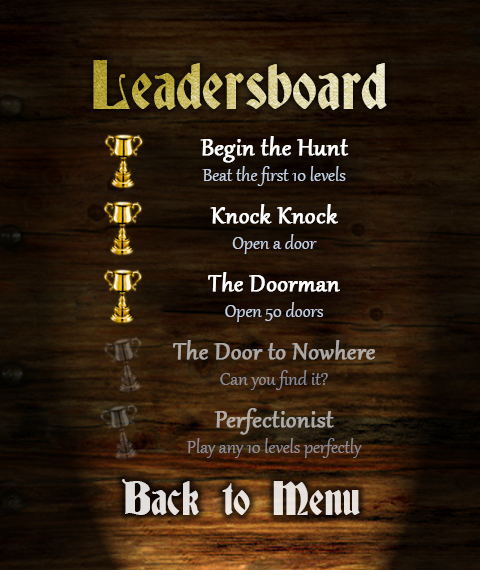
<style>
.page{position:relative;width:480px;height:570px}
.page>*{position:absolute;margin:0}
.t1{font:62px "Deutsch-Gothic"}
.t2{font:22px "Gabriola";color:#c4cfe2}
.t3{font:29px "Gabriola";color:#ffffff;font-weight:bold}
.t4{font:29px "Gabriola";color:#aca8a5;font-weight:bold}
.t5{font:22px "Gabriola";color:#aca8a5}
.t6{font:22px "Gabriola"}
.t7{font:29px "Gabriola";font-weight:bold}
.t8{font:43px "Deutsch-Gothic";color:#e6e0dd}
</style>
<div class="page">
<p class="t1" style="left:93px;top:60px;width:294px;height:50px">Leadersboard</p>
<p class="t2" style="left:200px;top:136px;width:149px;height:50px;text-align:center"><span class="t3">Begin the Hunt<br></span>Beat the first 10 levels</p>
<p class="t3" style="left:210px;top:204px;width:128px;height:50px;text-align:center">Knock Knock<br><span class="t2">Open a door</span></p>
<p class="t2" style="left:208px;top:272px;width:132px;height:50px;text-align:center"><span class="t3">The Doorman<br></span>Open 50 doors</p>
<p class="t4" style="left:173px;top:340px;width:202px;height:50px;text-align:center">The Door to Nowhere<br><span class="t5">Can you find it?</span></p>
<p class="t6" style="left:186px;top:408px;width:176px;height:50px;text-align:center"><span class="t7">Perfectionist<br></span>Play any 10 levels perfectly</p>
<p class="t8" style="left:122px;top:479px;width:238px;height:36px">Back to Menu</p>
</div>
